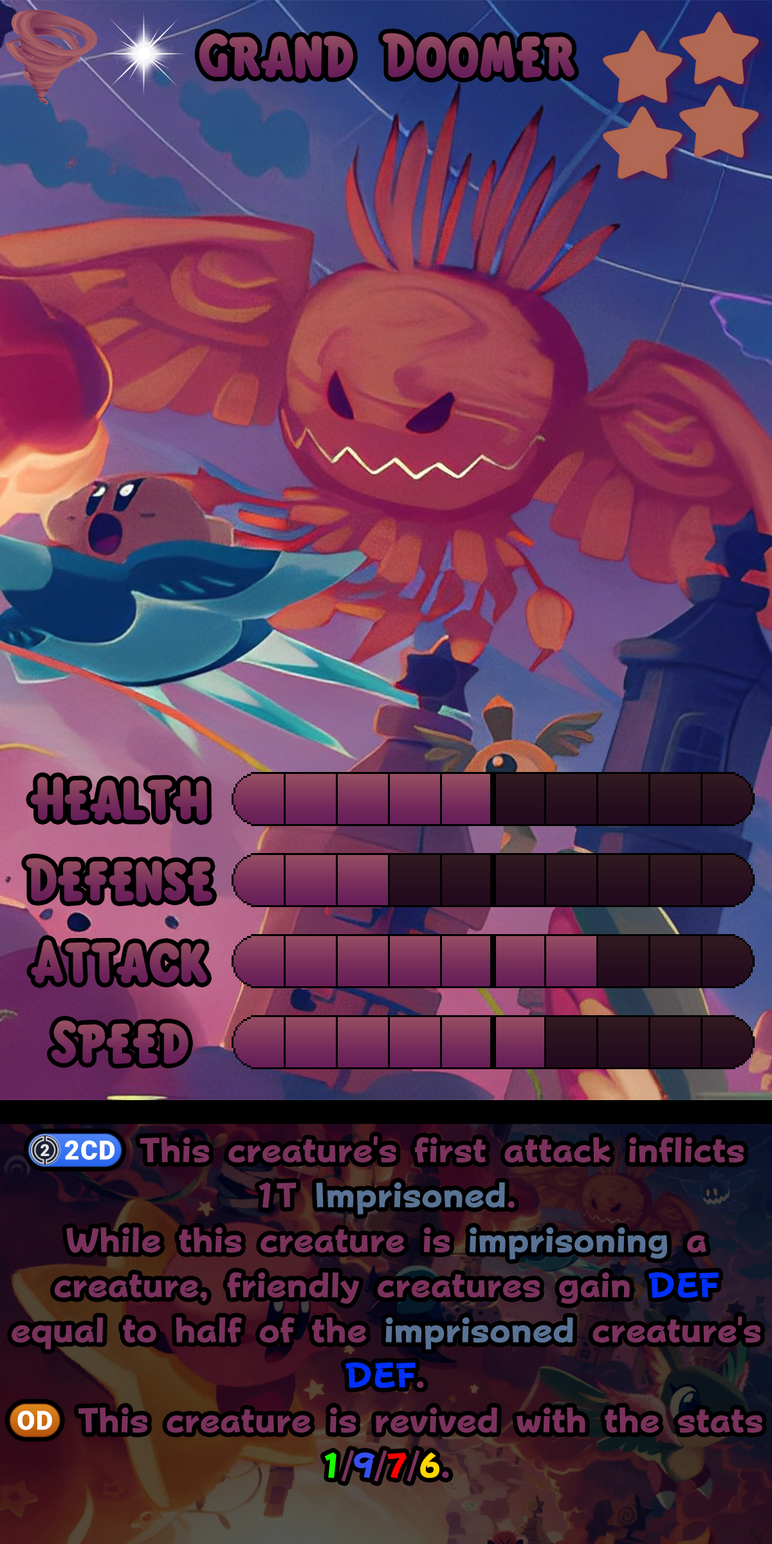
<style>
.page{position:relative;width:772px;height:1544px}
.page>*{position:absolute;margin:0}
.t1{font:95.2px "KirbyClassic";color:#79305c}
.t2{font:92.7px "KirbyClassic";color:#79305c}
.t3{font:92.7px "KirbyClassic";color:#7b325d}
.t4{font:92.7px "KirbyClassic";color:#7c335d}
.t5{font:59.2px/45px "FOTPopHappinessStrp-ExtraBold";letter-spacing:-0.005em;color:#7a325c}
.t6{font:34.5px/45px "stoogedings-Regular";color:#7a325c}
.t7{font:59.2px/45px "FOTPopHappinessStrp-ExtraBold";letter-spacing:-0.005em;color:#5a7395}
.t8{font:59.2px/45px "FOTPopHappinessStrp-ExtraBold";letter-spacing:-0.005em;color:#0030ff}
.t9{font:59.2px/45px "stoogedings-Regular";color:#7a325c}
.t10{font:59.2px/45px "FOTPopHappinessStrp-ExtraBold";letter-spacing:-0.005em;color:#18ff00}
.t11{font:59.2px/45px "FOTPopHappinessStrp-ExtraBold";letter-spacing:-0.005em;color:#3650f1}
.t12{font:59.2px/45px "FOTPopHappinessStrp-ExtraBold";letter-spacing:-0.005em;color:#ff0000}
.t13{font:59.2px/45px "FOTPopHappinessStrp-ExtraBold";letter-spacing:-0.005em;color:#fed700}
</style>
<div class="page">
<p class="t1" style="left:199px;top:33px;width:376px;height:46px">Grand Doomer</p>
<p class="t2" style="left:30px;top:777px;width:178px;height:44px">Health</p>
<p class="t3" style="left:26px;top:858px;width:186px;height:45px">Defense</p>
<p class="t2" style="left:31px;top:939px;width:176px;height:45px">Attack</p>
<p class="t4" style="left:51px;top:1021px;width:138px;height:43px">Speed</p>
<p class="t5" style="left:9px;top:1133px;width:753px;height:349px;text-align:center"><span class="t6">(2CD)</span> This creature's first attack inflicts 1T <span class="t7">Imprisoned</span>.<br>While this creature is <span class="t7">imprisoning</span> a creature, friendly creatures gain <span class="t8">DEF </span>equal to half of the <span class="t7">imprisoned</span> creature's <span class="t8">DEF</span>.<br><span class="t9">(OD)</span> This creature is revived with the stats <span class="t10">1</span>/<span class="t11">9</span>/<span class="t12">7</span>/<span class="t13">6</span>.</p>
</div>
